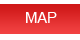
<style>
.page{position:relative;width:80px;height:40px;background:#ffffff}
.page>*{position:absolute;margin:0}
.t1{font:14.7px "ArialMT";color:#ffffff}
</style>
<div class="page">
<p class="t1" style="left:26px;top:12px;width:31px;height:11px">MAP</p>
</div>
